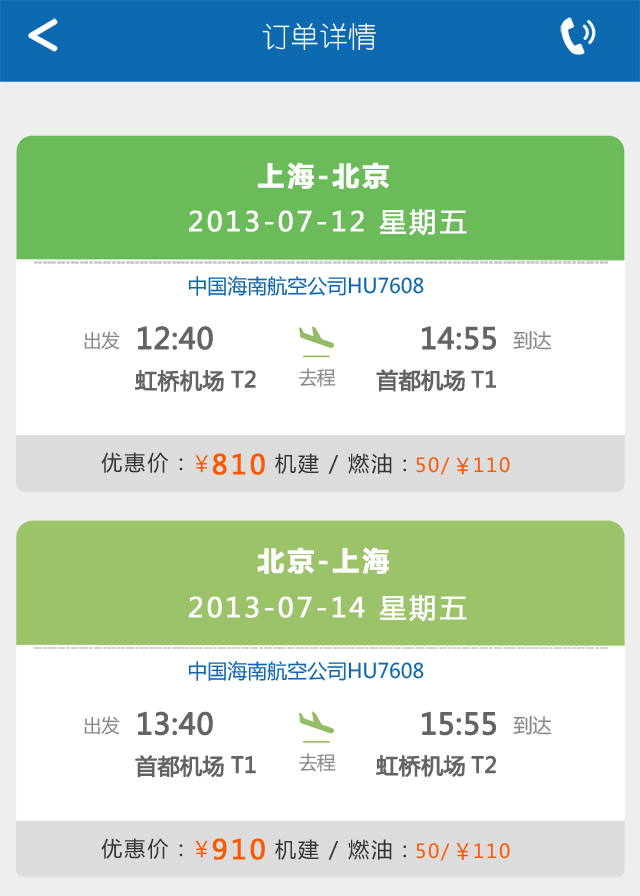
<style>
.page{position:relative;width:640px;height:896px;background:#ffffff}
.page>*{position:absolute;margin:0}
.t1{font:28.8px "YouYuan";color:#ffffff}
.t2{font:26.9px "MicrosoftYaHei-Bold";letter-spacing:0.09em;color:#fefefe;font-weight:bold}
.t3{font:26.9px "MicrosoftYaHei";letter-spacing:0.09em;color:#fefefe;font-weight:bold}
.t4{font:20px "MicrosoftYaHei";color:#0f67ae}
.t5{font:28.8px "MicrosoftYaHei";color:#646464;font-weight:bold}
.t6{font:18.4px "MicrosoftYaHei";color:#888888}
.t7{font:19.2px "MicrosoftYaHei";color:#888888}
.t8{font:21.9px "MicrosoftYaHei";color:#646464;font-weight:bold}
.t9{font:21.5px "MicrosoftYaHei";color:#646464;font-weight:bold}
.t10{font:21.1px "MicrosoftYaHei";letter-spacing:0.09em;color:#333333}
.t11{font:26.9px "MicrosoftYaHei";letter-spacing:0.09em;color:#fa5901;font-weight:bold}
.t12{font:19.2px "MicrosoftYaHei";letter-spacing:0.09em;color:#fa5901}
</style>
<div class="page">
<p class="t1" style="left:262px;top:23px;width:114px;height:28px">订单详情</p>
<p class="t2" style="left:257px;top:162px;width:132px;height:27px">上海-北京</p>
<p class="t3" style="left:189px;top:209px;width:278px;height:27px">2013-07-12 星期五</p>
<p class="t4" style="left:188px;top:276px;width:236px;height:20px">中国海南航空公司HU7608</p>
<p class="t5" style="left:138px;top:326px;width:75px;height:24px">12:40</p>
<p class="t5" style="left:422px;top:326px;width:74px;height:24px">14:55</p>
<p class="t6" style="left:84px;top:331px;width:36px;height:19px">出发</p>
<p class="t7" style="left:513px;top:330px;width:39px;height:20px">到达</p>
<p class="t8" style="left:135px;top:370px;width:89px;height:22px">虹桥机场</p>
<p class="t9" style="left:231px;top:370px;width:25px;height:18px">T2</p>
<p class="t6" style="left:299px;top:368px;width:37px;height:19px">去程</p>
<p class="t8" style="left:376px;top:369px;width:89px;height:23px">首都机场</p>
<p class="t9" style="left:471px;top:370px;width:25px;height:18px">T1</p>
<p class="t10" style="left:101px;top:452px;width:82px;height:21px">优惠价：</p>
<p class="t11" style="left:213px;top:453px;width:52px;height:22px">810</p>
<p class="t10" style="left:275px;top:453px;width:131px;height:21px">机建 / 燃油：</p>
<p class="t12" style="left:416px;top:457px;width:34px;height:18px">50/</p>
<p class="t12" style="left:474px;top:457px;width:36px;height:16px">110</p>
<p class="t2" style="left:257px;top:547px;width:132px;height:27px">北京-上海</p>
<p class="t3" style="left:189px;top:595px;width:278px;height:27px">2013-07-14 星期五</p>
<p class="t4" style="left:188px;top:661px;width:236px;height:20px">中国海南航空公司HU7608</p>
<p class="t5" style="left:138px;top:711px;width:75px;height:25px">13:40</p>
<p class="t5" style="left:422px;top:711px;width:74px;height:25px">15:55</p>
<p class="t6" style="left:84px;top:716px;width:36px;height:19px">出发</p>
<p class="t7" style="left:513px;top:715px;width:39px;height:20px">到达</p>
<p class="t8" style="left:135px;top:755px;width:89px;height:23px">首都机场</p>
<p class="t9" style="left:231px;top:755px;width:25px;height:19px">T1</p>
<p class="t6" style="left:299px;top:753px;width:37px;height:19px">去程</p>
<p class="t8" style="left:376px;top:755px;width:89px;height:22px">虹桥机场</p>
<p class="t9" style="left:471px;top:755px;width:25px;height:19px">T2</p>
<p class="t10" style="left:101px;top:838px;width:82px;height:21px">优惠价：</p>
<p class="t11" style="left:212px;top:838px;width:53px;height:22px">910</p>
<p class="t10" style="left:275px;top:839px;width:131px;height:21px">机建 / 燃油：</p>
<p class="t12" style="left:416px;top:843px;width:34px;height:18px">50/</p>
<p class="t12" style="left:474px;top:843px;width:36px;height:16px">110</p>
</div>
